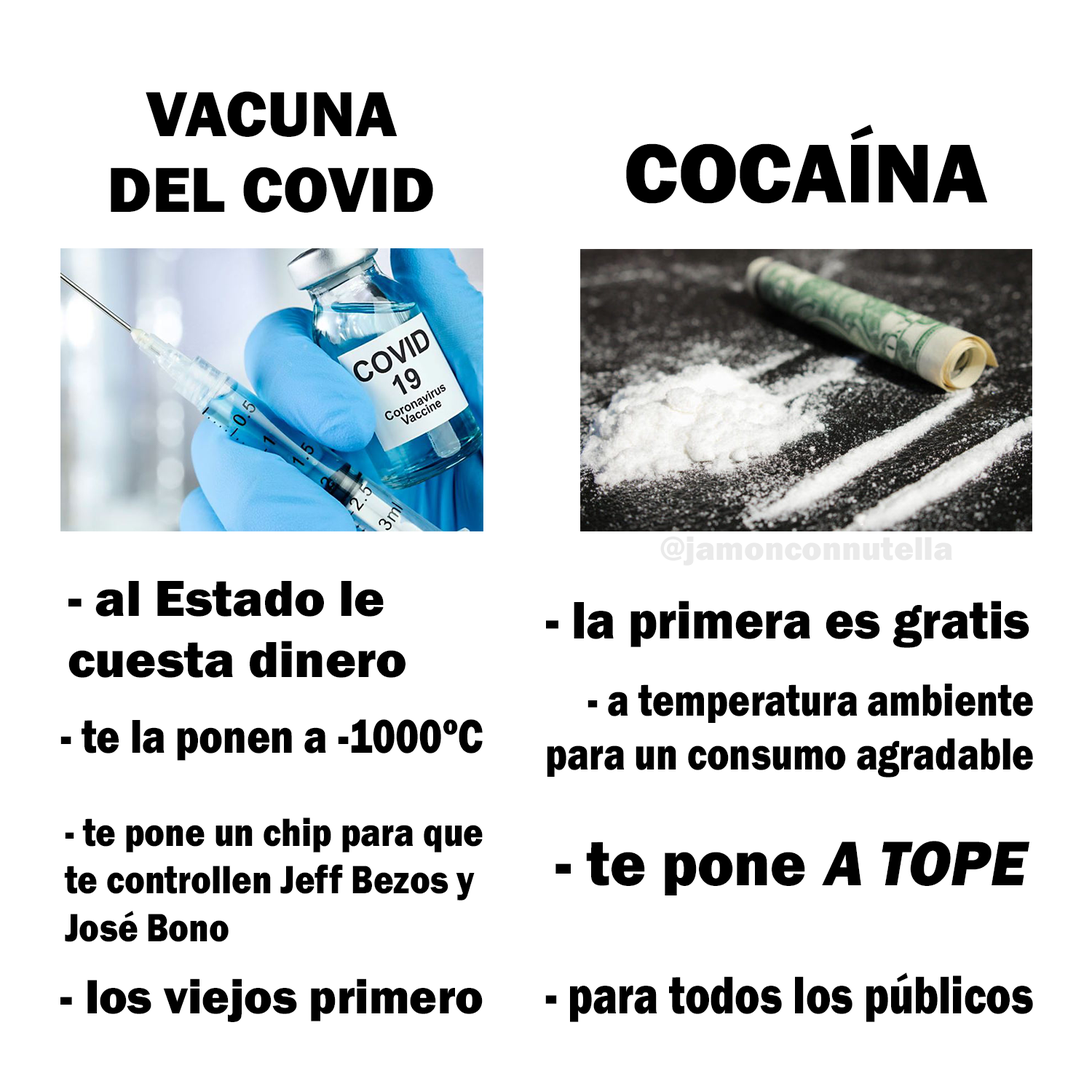
<style>
.page{position:relative;width:1092px;height:1092px;background:#ffffff}
.page>*{position:absolute;margin:0}
.t1{font:65.8px "FranklinGothic-Heavy";color:#000000}
.t2{font:86.3px "FranklinGothic-Heavy";color:#000000}
.t3{font:33.8px "FranklinGothic-Heavy";color:#eaeaea}
.t4{font:52.4px "FranklinGothic-Heavy";color:#000000}
.t5{font:54.7px "FranklinGothic-Heavy";color:#000000;scale:0.92 1}
.t6{font:46.7px "FranklinGothic-Heavy";color:#000000;scale:0.8 1}
.t7{font:49.2px "FranklinGothic-Heavy";color:#000000;scale:0.82 1}
.t8{font:41px "FranklinGothic-Heavy";color:#000000;scale:0.84 1}
.t9{font:65.4px "FranklinGothic-Heavy";color:#000000;scale:0.94 1}
.t10{font:65.4px "FranklinGothic-Heavy";color:#000000;font-style:italic;scale:0.94 1}
.t11{font:54.7px "FranklinGothic-Heavy";color:#000000;scale:0.78 1}
.t12{font:50.1px "FranklinGothic-Heavy";color:#000000;scale:0.95 1}
</style>
<div class="page">
<p class="t1" style="left:111px;top:91px;width:322px;height:122px;text-align:center">VACUNA<br>DEL COVID</p>
<p class="t2" style="left:626px;top:124px;width:362px;height:80px">COCAÍNA</p>
<p class="t3" style="left:660px;top:537px;width:292px;height:29px">@jamonconnutella</p>
<p class="t4" style="left:68px;top:581px;width:337px;height:97px">- al Estado le<br>cuesta dinero</p>
<p class="t5" style="left:546px;top:601px;width:483px;height:47px">- la primera es gratis</p>
<p class="t6" style="left:547px;top:684px;width:486px;height:93px;text-align:right">- a temperatura ambiente<br>para un consumo agradable</p>
<p class="t7" style="left:60px;top:719px;width:423px;height:42px">- te la ponen a -1000ºC</p>
<p class="t8" style="left:64px;top:818px;width:419px;height:124px">- te pone un chip para que<br>te controllen Jeff Bezos y<br>José Bono</p>
<p class="t9" style="left:555px;top:841px;width:474px;height:54px">- te pone <span class="t10">A TOPE</span></p>
<p class="t11" style="left:545px;top:973px;width:488px;height:49px">- para todos los públicos</p>
<p class="t12" style="left:60px;top:978px;width:423px;height:44px">- los viejos primero</p>
</div>
